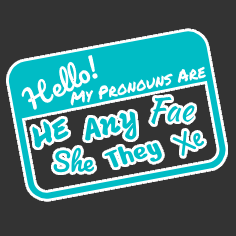
<style>
.page{position:relative;width:236px;height:236px;background:#333333}
.page>*{position:absolute;margin:0}
.t1{font:32.6px "KaushanScript-Regular";color:#00bcc5}
.t2{font:30.6px "Mogra-Regular";color:#00bcc5}
.t3{font:29.9px "PermanentMarker-Regular";color:#00bcc5}
.t4{font:22.7px "Lilly";color:#00bcc5}
.t5{font:25.5px "Pacifico-Regular";color:#00bcc5}
.t6{font:29.2px "NerkoOne-Regular";color:#00bcc5}
</style>
<div class="page">
<p class="t1" style="left:151px;top:97px;width:44px;height:28px;rotate:-2deg">Fae</p>
<p class="t2" style="left:85px;top:111px;width:52px;height:30px;rotate:-16deg">Any</p>
<p class="t3" style="left:32px;top:118px;width:37px;height:30px;rotate:-22deg">He</p>
<p class="t4" style="left:172px;top:131px;width:33px;height:25px;rotate:-30deg">Xe</p>
<p class="t5" style="left:53px;top:147px;width:42px;height:26px;rotate:-1deg">She</p>
<p class="t6" style="left:104px;top:143px;width:58px;height:25px;rotate:-18deg">They</p>
</div>
